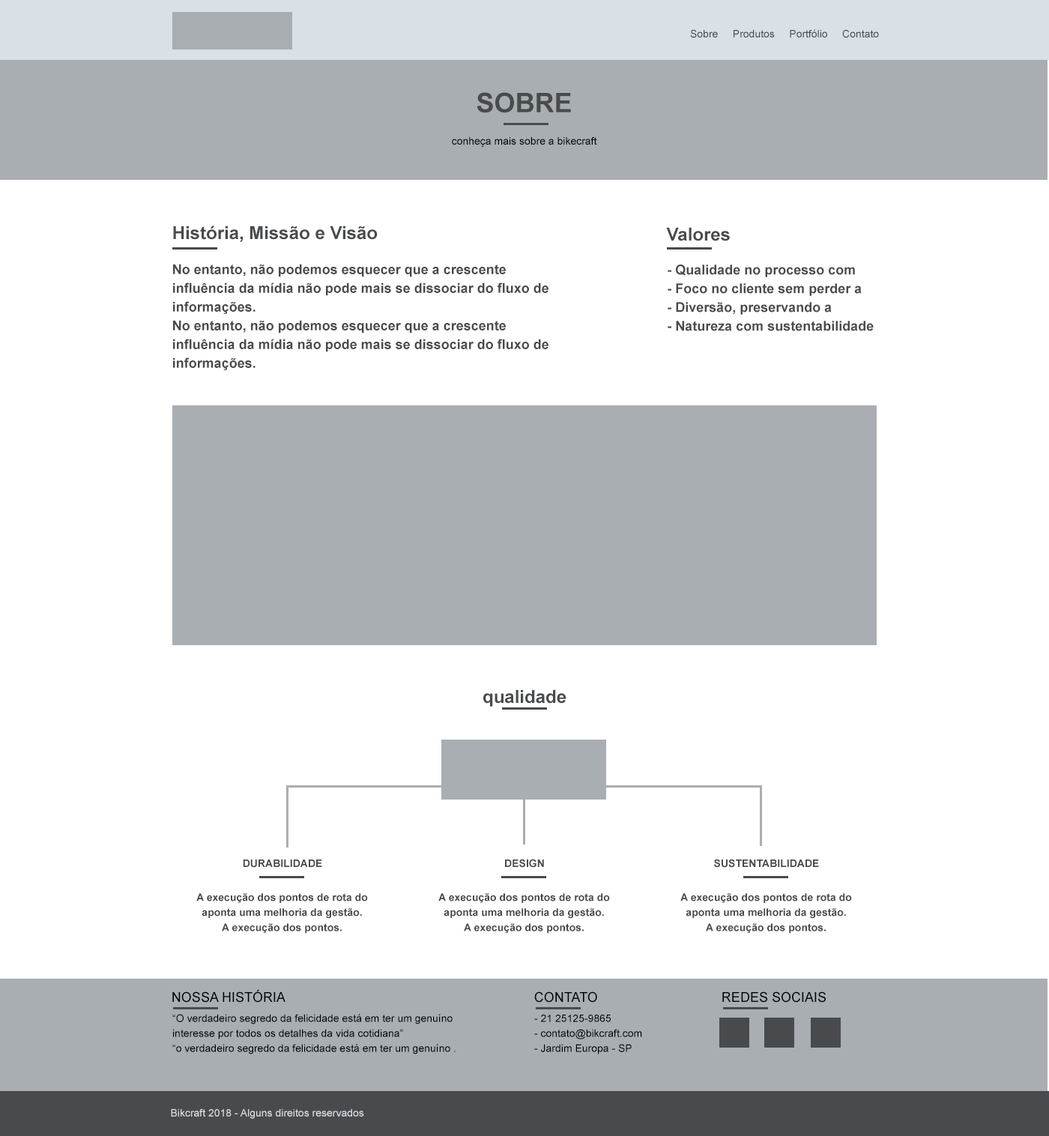
<style>
.page{position:relative;width:1049px;height:1136px;background:#ffffff}
.page>*{position:absolute;margin:0}
.t1{font:10.5px "ArialMT";color:#484b4d}
.t2{font:27px "Arial-BoldMT";color:#484b4d;text-transform:uppercase}
.t3{font:10.5px "ArialMT";color:#000000}
.t4{font:18px "Arial-BoldMT";color:#484b4d}
.t5{font:13.5px/18.7px "Arial-BoldMT";color:#484b4d}
.t6{font:10.5px "Arial-BoldMT";color:#484b4d;text-transform:uppercase}
.t7{font:10.5px/15.1px "Arial-BoldMT";color:#484b4d}
.t8{font:13.5px "ArialMT";color:#000000;text-transform:uppercase}
.t9{font:10.5px/15px "ArialMT";color:#000000}
.t10{font:10.5px "ArialMT";color:#d9e0e6}
</style>
<div class="page">
<p class="t1" style="left:690px;top:29px;width:189px;height:9px">Sobre     Produtos     Portfólio     Contato</p>
<p class="t2" style="left:477px;top:92px;width:94px;height:21px">sobre</p>
<p class="t3" style="left:452px;top:137px;width:145px;height:10px">conheça mais sobre a bikecraft</p>
<p class="t4" style="left:173px;top:226px;width:205px;height:16px">História, Missão e Visão</p>
<p class="t4" style="left:666px;top:227px;width:64px;height:14px">Valores</p>
<p class="t5" style="left:173px;top:264px;width:376px;height:106px">No entanto, não podemos esquecer que a crescente <br>influência da mídia não pode mais se dissociar do fluxo de <br>informações.<br>No entanto, não podemos esquecer que a crescente <br>influência da mídia não pode mais se dissociar do fluxo de informações.</p>
<p class="t5" style="left:668px;top:265px;width:206px;height:66px">- Qualidade no processo com<br>- Foco no cliente sem perder a <br>- Diversão, preservando a <br>- Natureza com sustentabilidade</p>
<p class="t4" style="left:483px;top:690px;width:84px;height:17px">qualidade</p>
<p class="t6" style="left:243px;top:860px;width:79px;height:8px">durabilidade</p>
<p class="t6" style="left:505px;top:859px;width:39px;height:9px">design</p>
<p class="t6" style="left:714px;top:859px;width:105px;height:9px">sustentabilidade</p>
<p class="t7" style="left:196px;top:893px;width:172px;height:41px;text-align:center">A execução dos pontos de rota do aponta uma melhoria da gestão.<br>A execução dos pontos.</p>
<p class="t7" style="left:438px;top:893px;width:172px;height:41px;text-align:center">A execução dos pontos de rota do aponta uma melhoria da gestão.<br>A execução dos pontos.</p>
<p class="t7" style="left:681px;top:893px;width:171px;height:41px;text-align:center">A execução dos pontos de rota do aponta uma melhoria da gestão.<br>A execução dos pontos.</p>
<p class="t8" style="left:172px;top:989px;width:114px;height:14px">Nossa História</p>
<p class="t8" style="left:534px;top:992px;width:63px;height:11px">contato</p>
<p class="t8" style="left:723px;top:992px;width:103px;height:11px">redes sociais</p>
<p class="t9" style="left:172px;top:1014px;width:284px;height:41px">“O verdadeiro segredo da felicidade está em ter um genuíno interesse por todos os detalhes da vida cotidiana”<br>“o verdadeiro segredo da felicidade está em ter um genuíno .</p>
<p class="t9" style="left:534px;top:1015px;width:108px;height:40px">- 21 25125-9865<br>- contato@bikcraft.com<br>- Jardim Europa - SP</p>
<p class="t10" style="left:171px;top:1109px;width:193px;height:10px">Bikcraft 2018 - Alguns direitos reservados</p>
</div>
